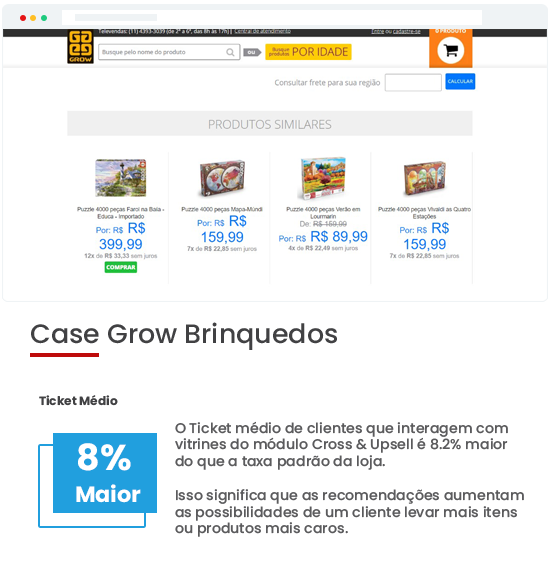
<style>
.page{position:relative;width:552px;height:572px;background:#ffffff}
.page>*{position:absolute;margin:0}
.t1{font:26.6px "Poppins-Medium";color:#414143}
.t2{font:12px "Poppins-Bold";color:#414143}
.t3{font:14px "Poppins-Medium";color:#5b5b5d}
.t4{font:36px "Poppins-Bold";color:#ffffff}
.t5{font:21.9px "Poppins-Bold";color:#ffffff}
</style>
<div class="page">
<p class="t1" style="left:31px;top:322px;width:306px;height:28px">Case Grow Brinquedos</p>
<p class="t2" style="left:39px;top:395px;width:79px;height:11px">Ticket Médio</p>
<p class="t3" style="left:175px;top:421px;width:349px;height:116px">O Ticket médio de clientes que interagem com <br>vitrines do módulo Cross &amp; Upsell é 8.2% maior<br>do que a taxa padrão da loja.<br><br>Isso significa que as recomendações aumentam<br>as possibilidades de um cliente levar mais itens<br>ou produtos mais caros.</p>
<p class="t4" style="left:78px;top:443px;width:53px;height:28px">8%</p>
<p class="t5" style="left:76px;top:484px;width:65px;height:19px">Maior</p>
</div>
